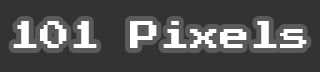
<style>
.page{position:relative;width:320px;height:72px;background:#333333}
.page>*{position:absolute;margin:0}
.t1{font:30px "PressStart2P-Regular";color:#ffffff}
</style>
<div class="page">
<p class="t1" style="left:13px;top:21px;width:294px;height:27px">101 Pixels</p>
</div>
